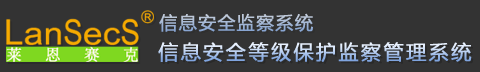
<style>
.page{position:relative;width:480px;height:72px;background:#333333}
.page>*{position:absolute;margin:0}
.t1{font:18px "MicrosoftYaHei";letter-spacing:0.05em;font-weight:bold}
.t2{font:20px "MicrosoftYaHei";letter-spacing:0.1em;font-weight:bold}
</style>
<div class="page">
<p class="t1" style="left:159px;top:13px;width:154px;height:19px">信息安全监察系统</p>
<p class="t2" style="left:158px;top:42px;width:314px;height:20px">信息安全等级保护监察管理系统</p>
</div>
